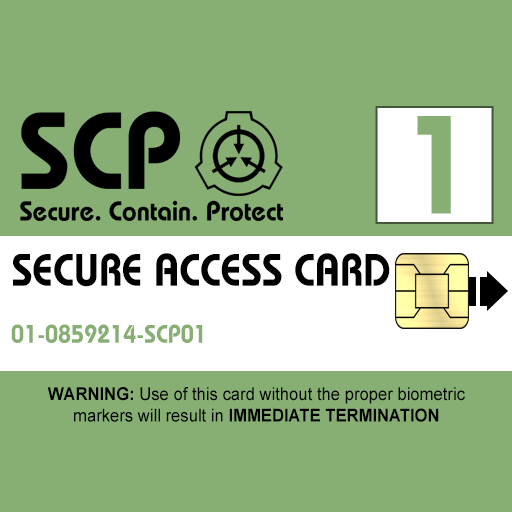
<style>
.page{position:relative;width:512px;height:512px;background:#87ae73}
.page>*{position:absolute;margin:0}
.t1{font:138.7px "BauhausLT-Demi";color:#87ae73;scale:0.95 1}
.t2{font:45.5px "BauhausLT-Demi";color:#000000;text-transform:uppercase;scale:0.91 1}
.t3{font:25.5px "BauhausLT-Demi";color:#87ae73;scale:0.92 1}
.t4{font:17.8px "ArialMT";color:#000000;scale:0.93 1}
.t5{font:17.8px "Arial-BoldMT";color:#000000;scale:0.93 1}
</style>
<div class="page">
<p class="t1" style="left:417px;top:116px;width:34px;height:98px">1</p>
<p class="t2" style="left:13px;top:253px;width:377px;height:34px">Secure Access Card</p>
<p class="t3" style="left:11px;top:324px;width:192px;height:19px">01-0859214-SCP01</p>
<p class="t4" style="left:47px;top:387px;width:418px;height:35px;text-align:center"><span class="t5">WARNING: </span>Use of this card without the proper biometric<br>markers will result in <span class="t5">IMMEDIATE TERMINATION</span></p>
</div>
